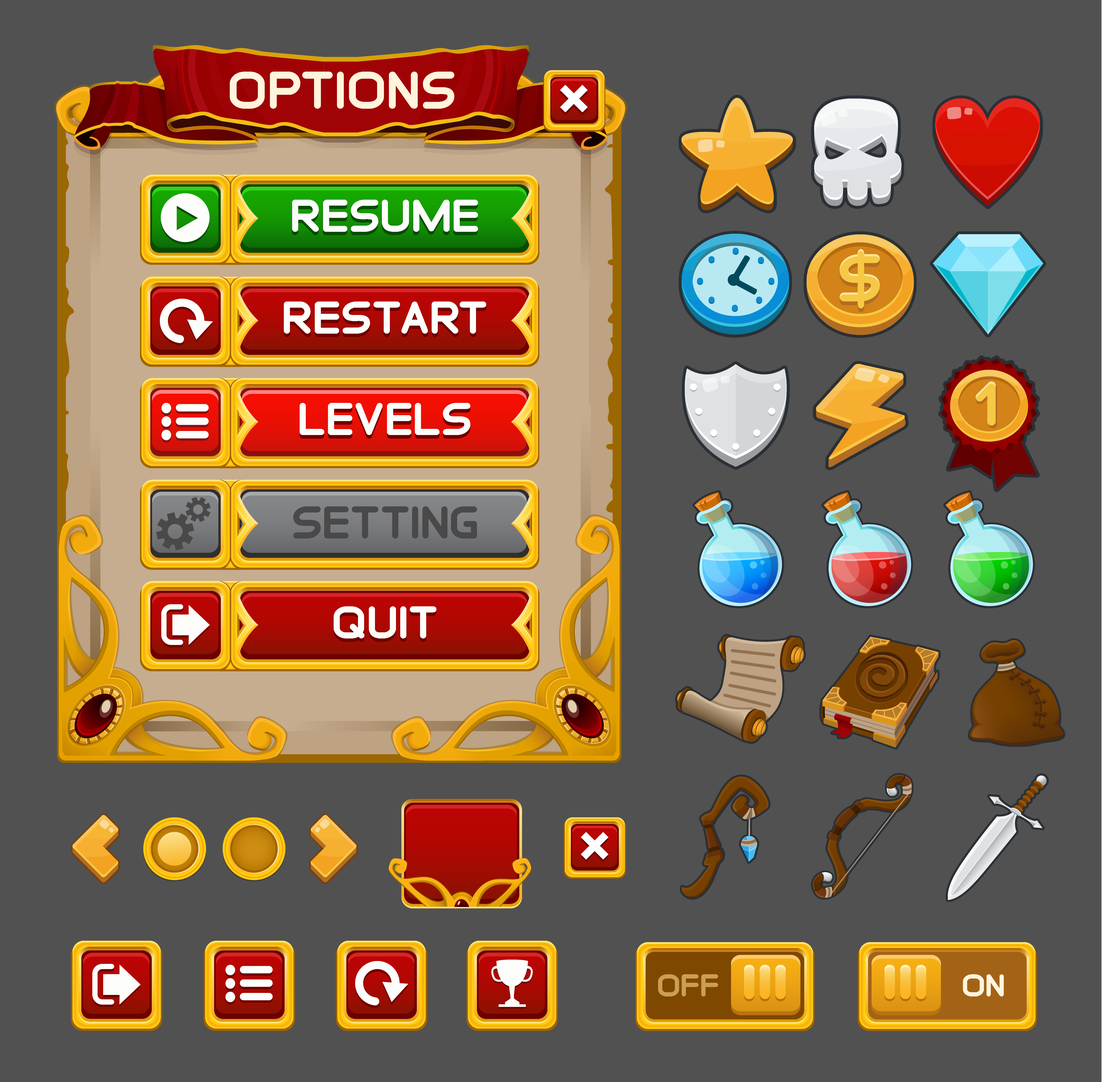
<style>
.page{position:relative;width:1102px;height:1082px;background:#515151}
.page>*{position:absolute;margin:0}
.t1{font:46.3px "SaranaiGame-Bold";color:#fff4dc}
.t2{font:40.1px "SaranaiGame-Bold"}
.t3{font:40.1px "SaranaiGame-Bold";color:#fdfefb}
.t4{font:40.1px "SaranaiGame-Bold";color:#494949}
.t5{font:27.6px "SaranaiGame-Bold";color:#cc9f50}
.t6{font:27.6px "SaranaiGame-Bold";color:#fff4dc}
</style>
<div class="page">
<p class="t1" style="left:230px;top:72px;width:224px;height:37px">options</p>
<p class="t2" style="left:292px;top:203px;width:186px;height:32px">resume</p>
<p class="t3" style="left:292px;top:200px;width:186px;height:32px">resume</p>
<p class="t3" style="left:284px;top:301px;width:202px;height:33px">restart</p>
<p class="t2" style="left:284px;top:305px;width:203px;height:32px">restart</p>
<p class="t2" style="left:300px;top:406px;width:171px;height:32px">levels</p>
<p class="t3" style="left:300px;top:403px;width:171px;height:32px">levels</p>
<p class="t4" style="left:293px;top:506px;width:184px;height:32px">setting</p>
<p class="t3" style="left:334px;top:609px;width:103px;height:33px">quit</p>
<p class="t3" style="left:334px;top:606px;width:103px;height:32px">quit</p>
<p class="t5" style="left:658px;top:974px;width:60px;height:22px">OFF</p>
<p class="t6" style="left:963px;top:974px;width:41px;height:22px">On</p>
</div>
